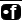
<style>
.page{position:relative;width:22px;height:22px;background:#ffffff}
.page>*{position:absolute;margin:0}
.t1{font:19.4px "Arial-BoldMT";color:#ffffff}
.t2{font:14.6px "Arial-BoldMT";color:#ffffff;scale:1.22 1}
</style>
<div class="page">
<p class="t1" style="left:10px;top:4px;width:7px;height:14px">f</p>
<p class="t2" style="left:3px;top:9px;width:6px;height:4px">•</p>
</div>
